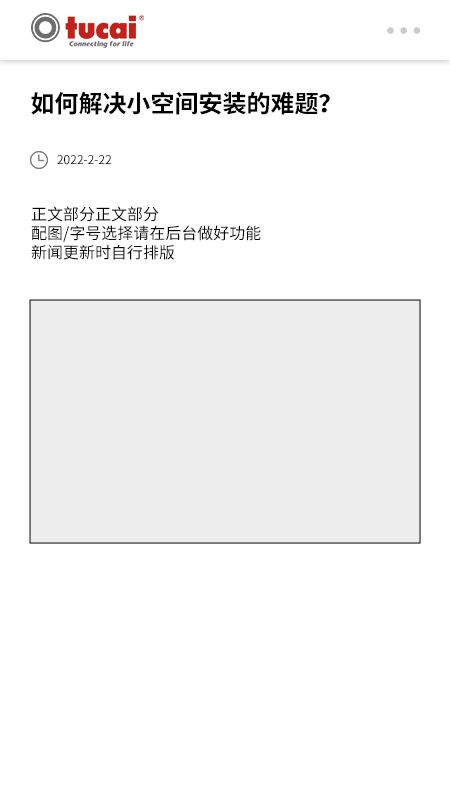
<style>
.page{position:relative;width:450px;height:799px;background:#ffffff}
.page>*{position:absolute;margin:0}
.t1{font:24px "SourceHanSansCN-Bold";color:#000000}
.t2{font:12px "SourceHanSansCN-Regular";color:#000000}
.t3{font:16px "SourceHanSansCN-Regular";color:#000000}
</style>
<div class="page">
<p class="t1" style="left:31px;top:91px;width:299px;height:24px">如何解决小空间安装的难题？</p>
<p class="t2" style="left:57px;top:155px;width:55px;height:10px">2022-2-22</p>
<p class="t3" style="left:31px;top:206px;width:230px;height:54px">正文部分正文部分<br>配图/字号选择请在后台做好功能<br>新闻更新时自行排版</p>
</div>
